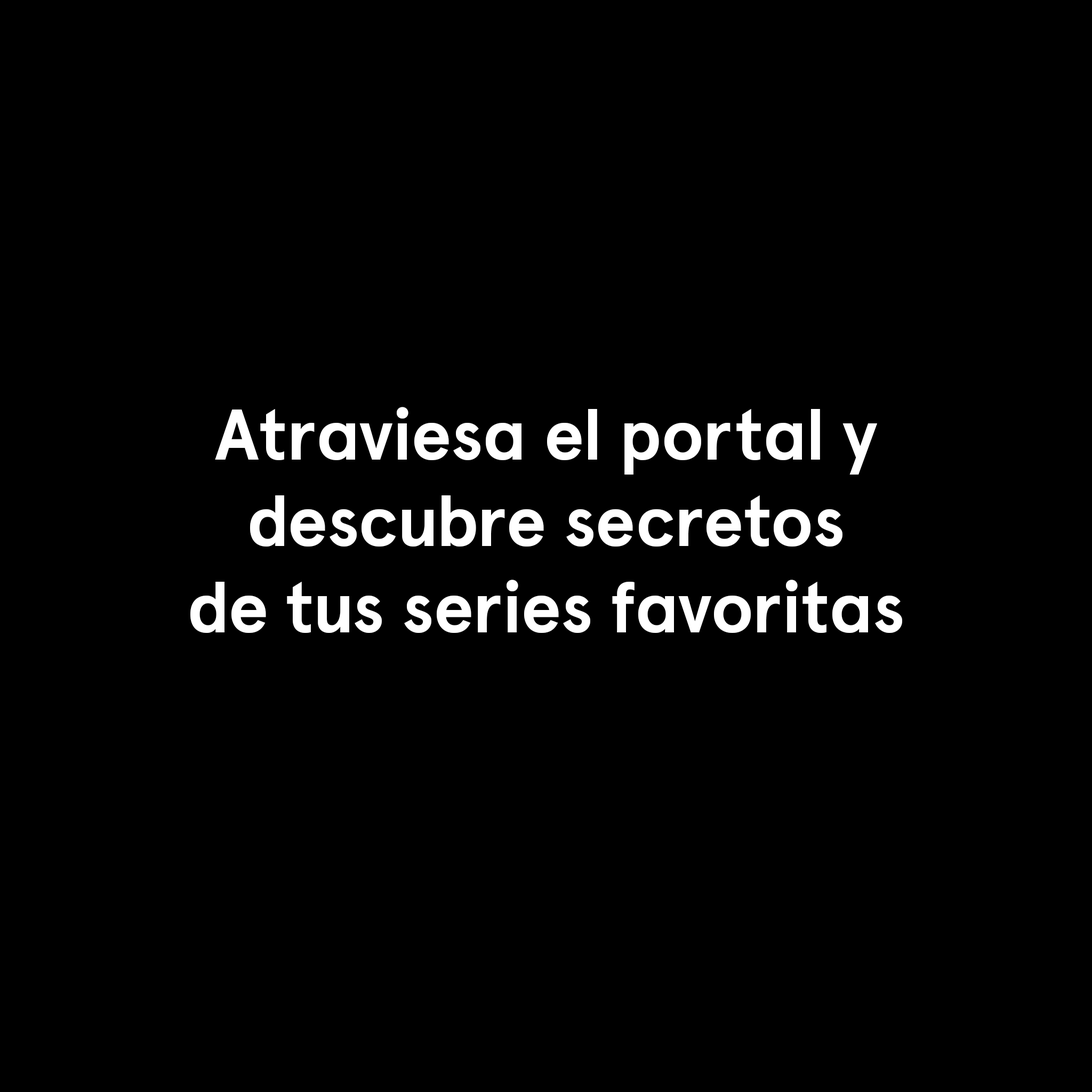
<style>
.page{position:relative;width:1092px;height:1092px;background:#000000}
.page>*{position:absolute;margin:0}
.t1{font:72px "ApercuMovistarPlus-Bold";color:#ffffff}
</style>
<div class="page">
<p class="t1" style="left:190px;top:407px;width:712px;height:226px;text-align:center">Atraviesa el portal y<br>descubre secretos<br>de tus series favoritas</p>
</div>
